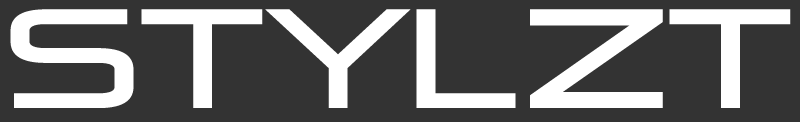
<style>
.page{position:relative;width:800px;height:122px;background:#333333}
.page>*{position:absolute;margin:0}
.t1{font:140px "Pirulen";color:#ffffff}
</style>
<div class="page">
<p class="t1" style="left:10px;top:9px;width:781px;height:99px">STYLZT</p>
</div>
